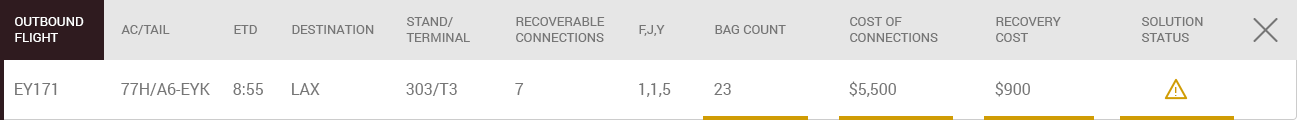
<style>
.page{position:relative;width:1297px;height:120px;background:#ffffff}
.page>*{position:absolute;margin:0}
.t1{font:13px "Roboto-Regular";color:#ffffff;text-transform:uppercase}
.t2{font:13px "Roboto-Regular";color:#767676;text-transform:uppercase}
.t3{font:16px "Roboto-Regular";color:#767676}
.t4{font:13.3px "Roboto-Regular";color:#d09c04}
</style>
<div class="page">
<p class="t1" style="left:15px;top:17px;width:69px;height:25px">Outbound<br>Flight</p>
<p class="t2" style="left:406px;top:17px;width:64px;height:25px">Stand/<br>Terminal</p>
<p class="t2" style="left:516px;top:17px;width:89px;height:25px">Recoverable<br>Connections</p>
<p class="t2" style="left:850px;top:17px;width:88px;height:25px">Cost of<br>Connections</p>
<p class="t2" style="left:996px;top:17px;width:65px;height:25px">Recovery<br>Cost</p>
<p class="t2" style="left:1142px;top:17px;width:61px;height:25px">Solution<br>Status</p>
<p class="t2" style="left:121px;top:25px;width:49px;height:10px">AC/Tail</p>
<p class="t2" style="left:234px;top:25px;width:23px;height:9px">ETD</p>
<p class="t2" style="left:292px;top:25px;width:82px;height:9px">Destination</p>
<p class="t2" style="left:639px;top:25px;width:26px;height:11px">F,J,Y</p>
<p class="t2" style="left:715px;top:25px;width:71px;height:9px">Bag Count</p>
<p class="t3" style="left:15px;top:83px;width:42px;height:12px">EY171</p>
<p class="t3" style="left:121px;top:83px;width:89px;height:13px">77H/A6-EYK</p>
<p class="t3" style="left:233px;top:83px;width:30px;height:12px">8:55</p>
<p class="t3" style="left:292px;top:83px;width:28px;height:12px">LAX</p>
<p class="t3" style="left:406px;top:83px;width:51px;height:13px">303/T3</p>
<p class="t3" style="left:515px;top:83px;width:9px;height:12px">7</p>
<p class="t3" style="left:639px;top:83px;width:32px;height:14px">1,1,5</p>
<p class="t3" style="left:714px;top:83px;width:17px;height:12px">23</p>
<p class="t3" style="left:849px;top:81px;width:47px;height:16px">$5,500</p>
<p class="t3" style="left:995px;top:81px;width:35px;height:16px">$900</p>
<p class="t4" style="left:1175px;top:87px;width:2px;height:9px">!</p>
</div>
